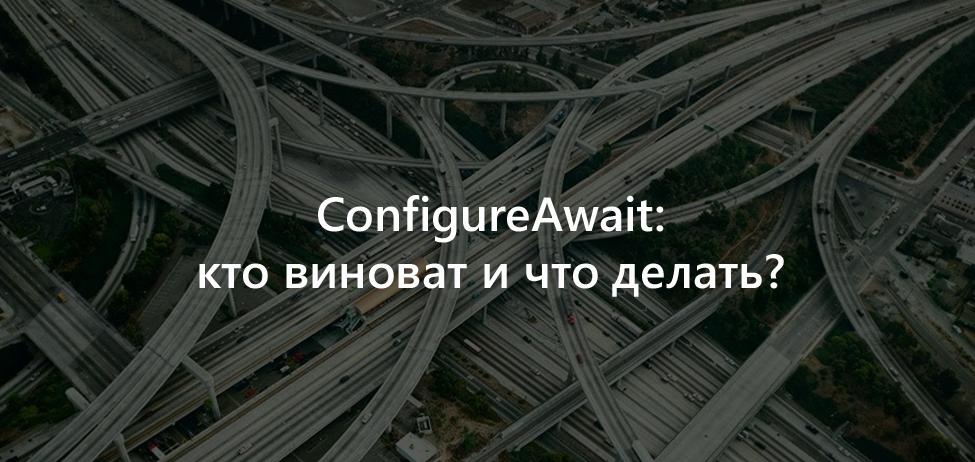
<style>
.page{position:relative;width:975px;height:462px}
.page>*{position:absolute;margin:0}
.t1{font:48px "SegoeUI-SemiBold";color:#fdfdfd}
</style>
<div class="page">
<p class="t1" style="left:199px;top:195px;width:585px;height:102px;text-align:center">ConfigureAwait:<br>кто виноват и что делать?</p>
</div>
